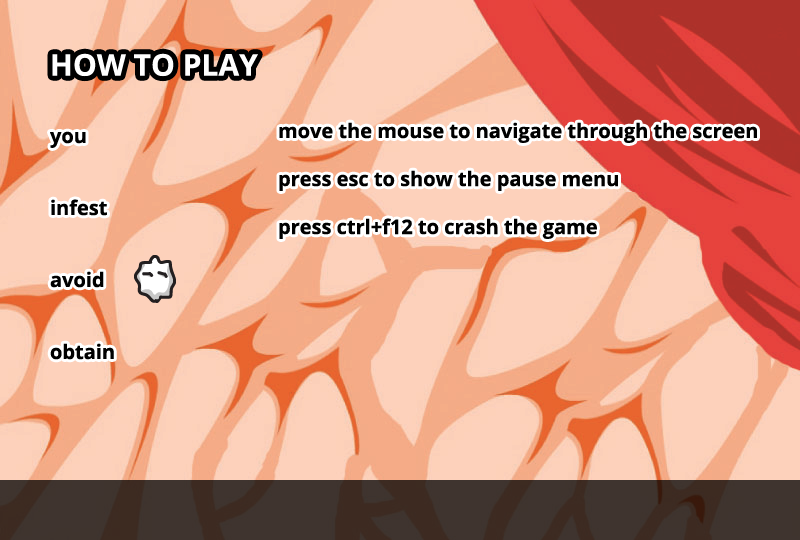
<style>
.page{position:relative;width:800px;height:540px;background:#fdd1bb}
.page>*{position:absolute;margin:0}
.t1{font:30px "OpenSans-Bold";color:#ffffff}
.t2{font:20px "OpenSans-Bold";color:#000000}
</style>
<div class="page">
<p class="t1" style="left:52px;top:53px;width:206px;height:24px">HOW TO PLAY</p>
<p class="t2" style="left:279px;top:122px;width:478px;height:117px">move the mouse to navigate through the screen<br><br>press esc to show the pause menu<br><br>press ctrl+f12 to crash the game</p>
<p class="t2" style="left:50px;top:131px;width:64px;height:229px">you<br><br><br>infest<br><br><br>avoid<br><br><br>obtain</p>
</div>
